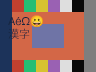
<style>
.page{position:relative;width:96px;height:72px;background:#d36747}
.page>*{position:absolute;margin:0}
.t1{font:11px "Helvetica"}
.t2{font:11px "NotoColorEmoji-SVG"}
.t3{font:11px "KozGoPr6N-Regular"}
</style>
<div class="page">
<p class="t1" style="left:8px;top:15px;width:35px;height:24px">AéΩ<span class="t2">😀<br></span><span class="t3">漢字</span></p>
</div>
